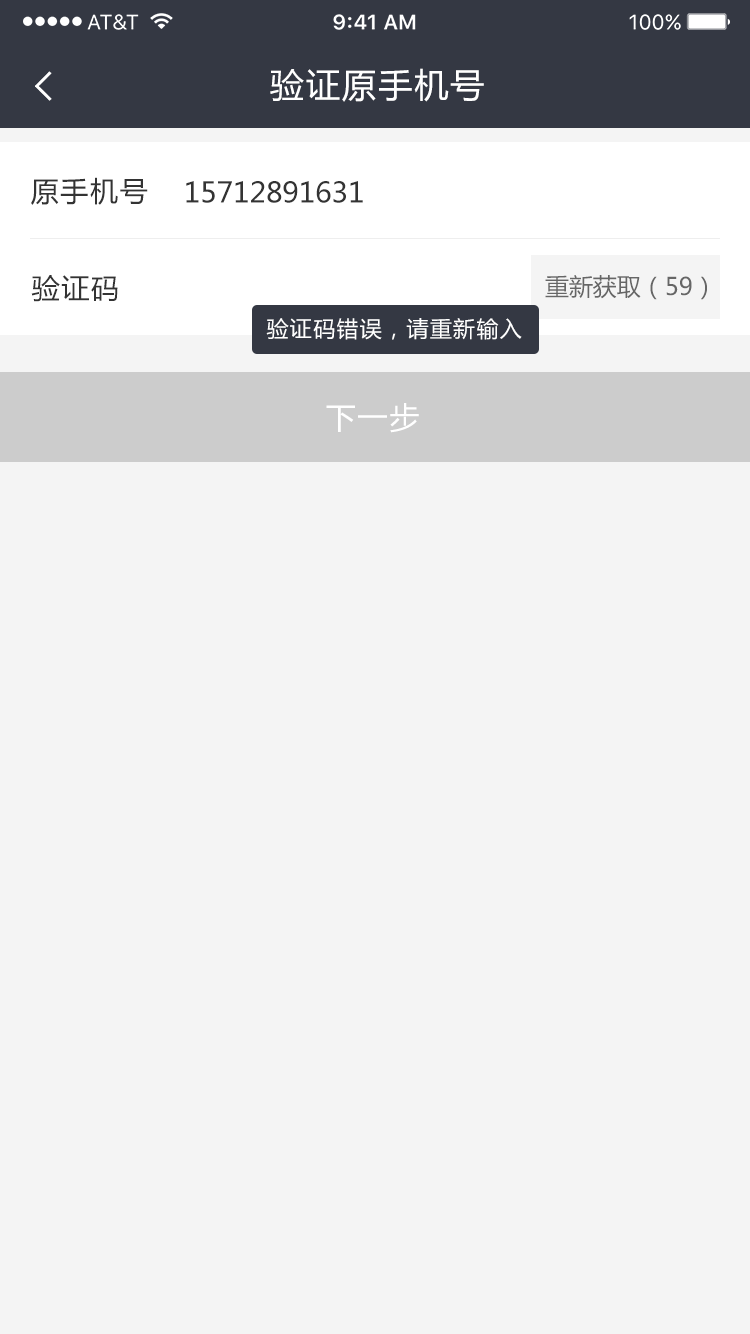
<style>
.page{position:relative;width:750px;height:1334px;background:#f4f4f4}
.page>*{position:absolute;margin:0}
.t1{font:34px "MicrosoftYaHei";letter-spacing:0.06em;color:#ffffff}
.t2{font:28px "MicrosoftYaHei";letter-spacing:0.06em;color:#333333}
.t3{font:28px "MicrosoftYaHei";color:#333333}
.t4{font:24px "MicrosoftYaHei";color:#666666}
.t5{font:22px "MicrosoftYaHei";letter-spacing:0.06em;color:#ffffff}
.t6{font:30px "MicrosoftYaHei";letter-spacing:0.06em;color:#ffffff}
</style>
<div class="page">
<p class="t1" style="left:270px;top:68px;width:214px;height:34px">验证原手机号</p>
<p class="t2" style="left:31px;top:177px;width:117px;height:28px">原手机号</p>
<p class="t3" style="left:186px;top:181px;width:177px;height:22px">15712891631</p>
<p class="t2" style="left:31px;top:275px;width:87px;height:27px">验证码</p>
<p class="t4" style="left:545px;top:275px;width:162px;height:25px">重新获取（59）</p>
<p class="t5" style="left:266px;top:318px;width:256px;height:22px">验证码错误，请重新输入</p>
<p class="t6" style="left:326px;top:403px;width:93px;height:30px">下一步</p>
</div>
